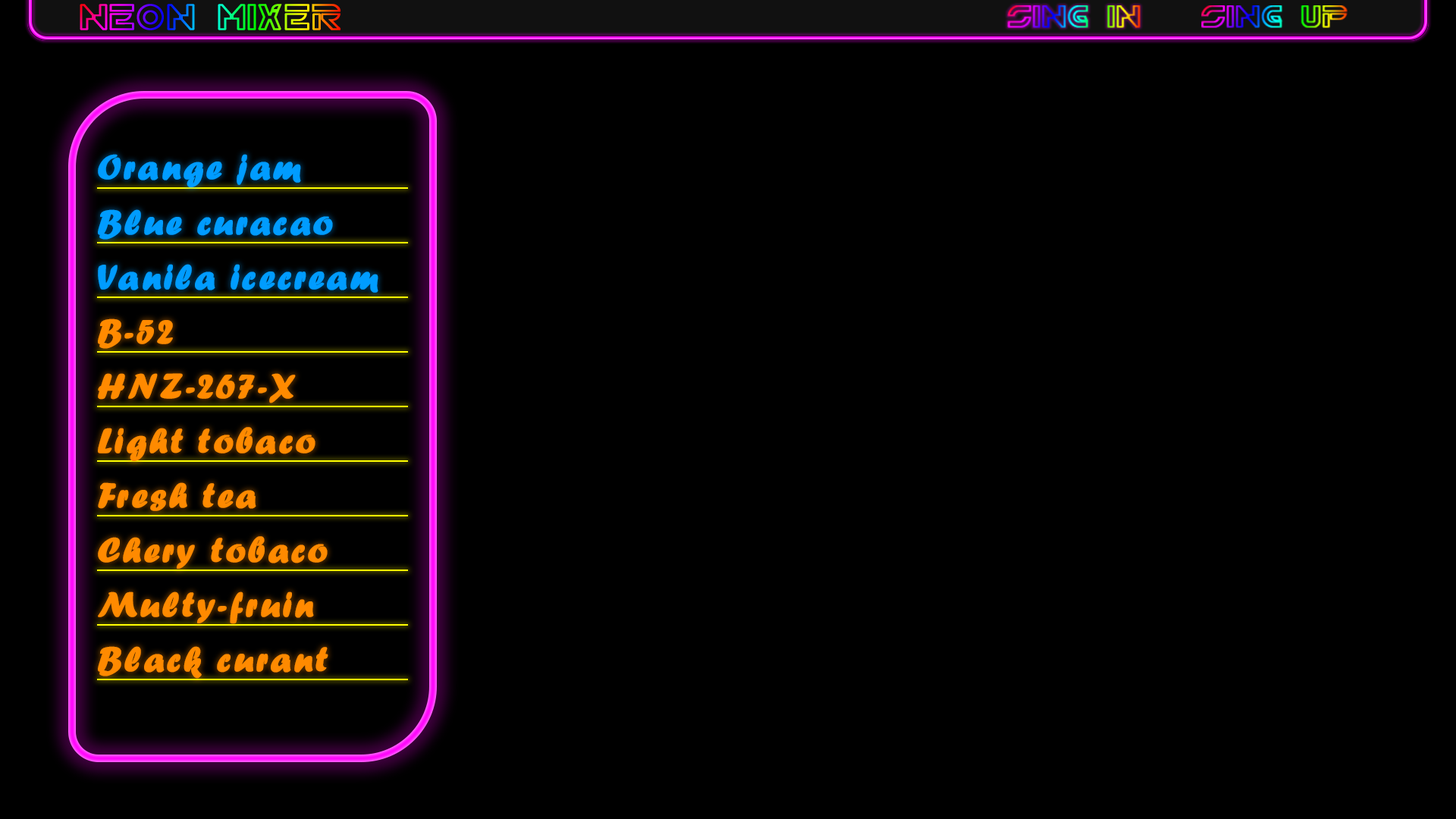
<style>
.page{position:relative;width:1456px;height:819px;background:#000000}
.page>*{position:absolute;margin:0}
.t1{font:36.4px "ForteMT";letter-spacing:0.05em;color:#009cff;font-weight:bold}
.t2{font:36.4px "ForteMT";letter-spacing:0.05em;color:#ff8a00;font-weight:bold}
</style>
<div class="page">
<p class="t1" style="left:98px;top:154px;width:203px;height:33px">Orange jam</p>
<p class="t1" style="left:98px;top:209px;width:235px;height:31px">Blue curacao</p>
<p class="t1" style="left:98px;top:264px;width:280px;height:29px">Vanila icecream</p>
<p class="t2" style="left:98px;top:318px;width:75px;height:31px">B-52</p>
<p class="t2" style="left:98px;top:373px;width:198px;height:30px">HNZ-267-X</p>
<p class="t2" style="left:98px;top:427px;width:217px;height:34px">Light tobaco</p>
<p class="t2" style="left:98px;top:482px;width:158px;height:29px">Fresh tea</p>
<p class="t2" style="left:98px;top:536px;width:230px;height:33px">Chery tobaco</p>
<p class="t2" style="left:98px;top:591px;width:216px;height:33px">Multy-fruin</p>
<p class="t2" style="left:98px;top:646px;width:230px;height:33px">Black curant</p>
</div>
